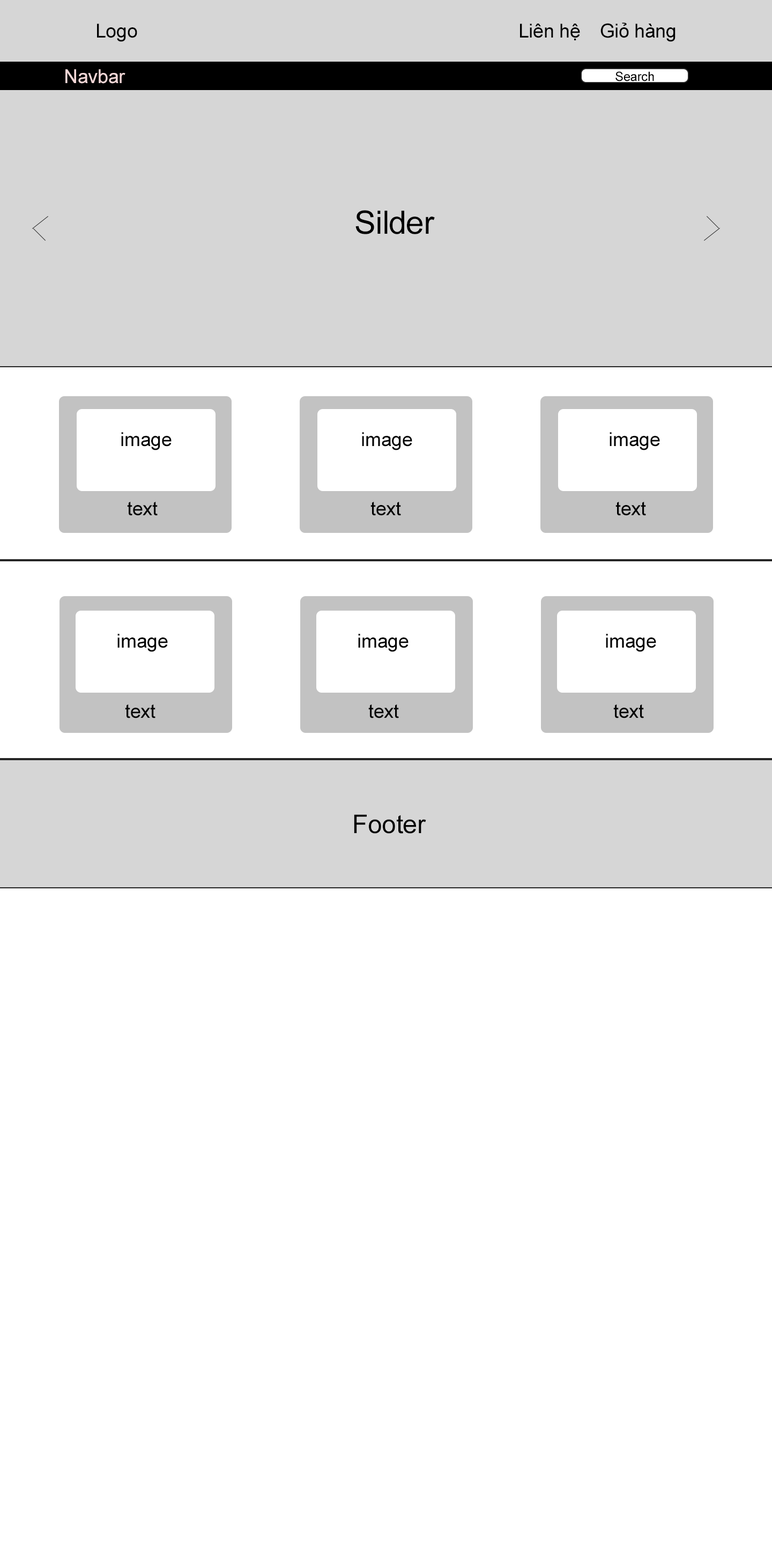
<style>
.page{position:relative;width:772px;height:1544px;background:#ffffff}
.page>*{position:absolute;margin:0}
.t1{font:19.3px "ArialMT";letter-spacing:-0.01em;color:#000000}
.t2{font:19.3px "ArialMT";letter-spacing:-0.01em;color:#f1d6d6}
.t3{font:12.9px "ArialMT";letter-spacing:-0.01em;color:#000000}
.t4{font:32.2px "ArialMT";letter-spacing:-0.01em;color:#000000}
.t5{font:25.7px "ArialMT";letter-spacing:-0.01em;color:#000000}
</style>
<div class="page">
<p class="t1" style="left:97px;top:24px;width:40px;height:18px">Logo</p>
<p class="t1" style="left:520px;top:24px;width:60px;height:17px">Liên hệ</p>
<p class="t1" style="left:601px;top:23px;width:75px;height:19px">Giỏ hàng</p>
<p class="t2" style="left:65px;top:69px;width:60px;height:15px">Navbar</p>
<p class="t3" style="left:616px;top:71px;width:38px;height:11px">Search</p>
<p class="t4" style="left:356px;top:210px;width:79px;height:24px">Silder</p>
<p class="t1" style="left:121px;top:432px;width:51px;height:18px">image</p>
<p class="t1" style="left:362px;top:432px;width:50px;height:18px">image</p>
<p class="t1" style="left:610px;top:432px;width:50px;height:18px">image</p>
<p class="t1" style="left:127px;top:501px;width:31px;height:15px">text</p>
<p class="t1" style="left:371px;top:501px;width:30px;height:15px">text</p>
<p class="t1" style="left:616px;top:501px;width:30px;height:15px">text</p>
<p class="t1" style="left:117px;top:634px;width:51px;height:18px">image</p>
<p class="t1" style="left:358px;top:634px;width:51px;height:18px">image</p>
<p class="t1" style="left:606px;top:634px;width:50px;height:18px">image</p>
<p class="t1" style="left:125px;top:704px;width:31px;height:15px">text</p>
<p class="t1" style="left:368px;top:704px;width:31px;height:15px">text</p>
<p class="t1" style="left:613px;top:704px;width:31px;height:15px">text</p>
<p class="t5" style="left:354px;top:815px;width:72px;height:19px">Footer</p>
</div>
